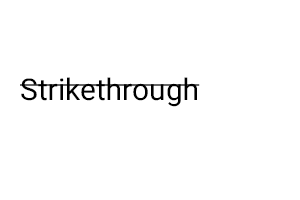
<style>
.page{position:relative;width:300px;height:200px;background:#ffffff}
.page>*{position:absolute;margin:0}
.t1{font:30px "Roboto-Regular";color:#000000}
</style>
<div class="page">
<p class="t1" style="left:20px;top:77px;width:180px;height:30px">Strikethrough</p>
</div>
